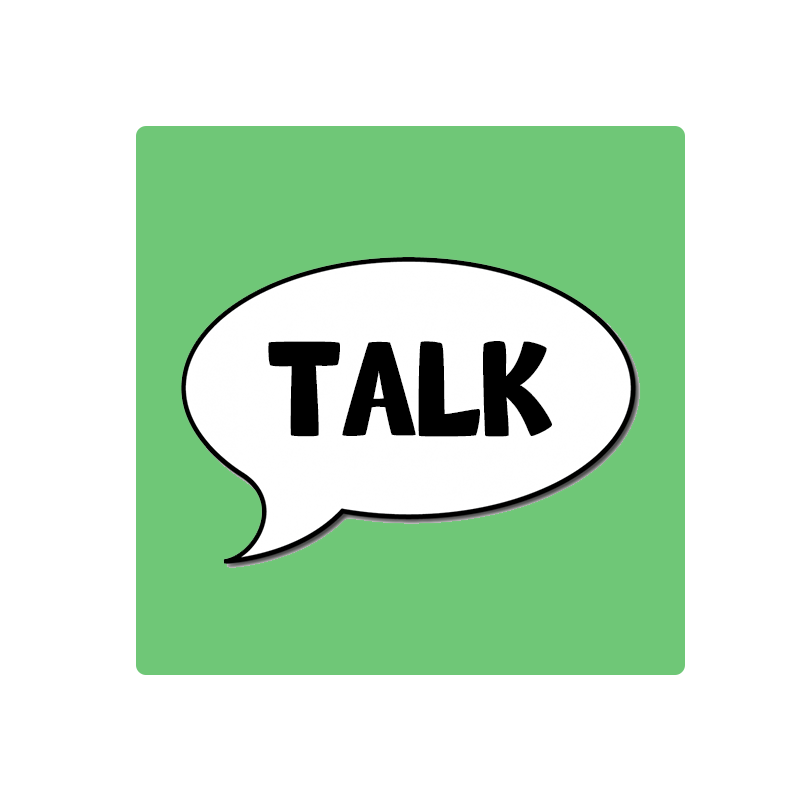
<style>
.page{position:relative;width:800px;height:800px;background:#ffffff}
.page>*{position:absolute;margin:0}
.t1{font:80.3px "Big_Bottom_Cartoon";color:#000000}
</style>
<div class="page">
<p class="t1" style="left:268px;top:341px;width:284px;height:96px">TALK</p>
</div>
